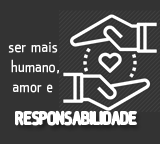
<style>
.page{position:relative;width:160px;height:144px;background:#333333}
.page>*{position:absolute;margin:0}
.t1{font:16.7px "qontra-Regular";color:#ffffff}
</style>
<div class="page">
<p class="t1" style="left:8px;top:42px;width:51px;height:51px;text-align:center">ser mais <br>humano,<br>amor e</p>
<p class="t1" style="left:16px;top:111px;width:120px;height:14px">RESPONSABILIDADE</p>
</div>
